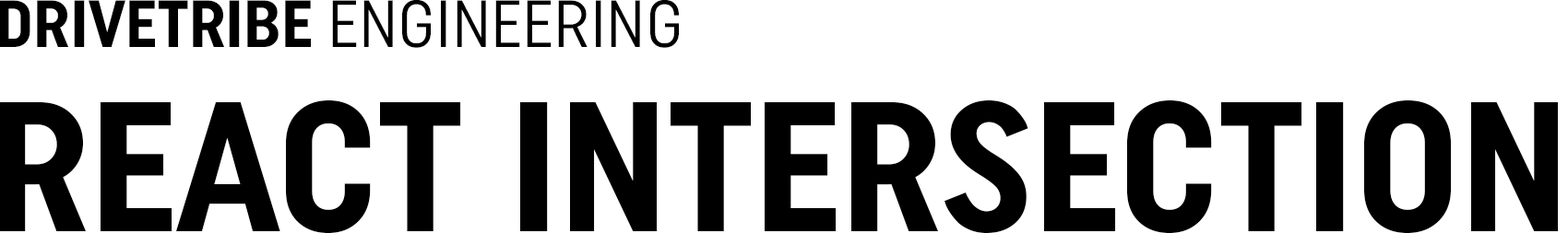
<style>
.page{position:relative;width:1568px;height:233px;background:#ffffff}
.page>*{position:absolute;margin:0}
.t1{font:66.4px "UniformCondensedRegular-Regular";color:#000000}
.t2{font:66.4px "UniformCondensedBold-Regular";color:#000000}
.t3{font:184.5px "UniformCondensedBold-Regular";color:#000000}
</style>
<div class="page">
<p class="t1" style="left:0px;top:0px;width:679px;height:48px"><span class="t2">DRIVETRIBE</span> ENGINEERING</p>
<p class="t3" style="left:0px;top:101px;width:1558px;height:132px">REACT INTERSECTION</p>
</div>
